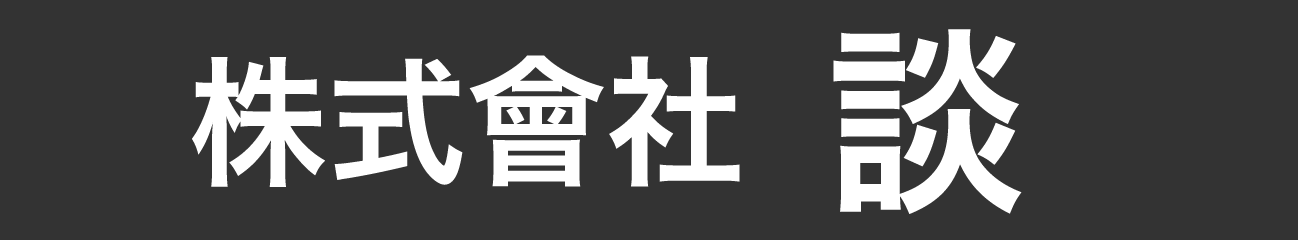
<style>
.page{position:relative;width:1298px;height:240px;background:#333333}
.page>*{position:absolute;margin:0}
.t1{font:200px "HiraKakuProN-W6";letter-spacing:-0.005em;color:#ffffff}
.t2{font:140px "HiraKakuProN-W6";letter-spacing:-0.005em;color:#ffffff}
</style>
<div class="page">
<p class="t1" style="left:833px;top:29px;width:189px;height:185px">談</p>
<p class="t2" style="left:192px;top:55px;width:548px;height:132px">株式會社</p>
</div>
